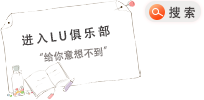
<style>
.page{position:relative;width:204px;height:100px;background:#ffffff}
.page>*{position:absolute;margin:0}
.t1{font:12.3px "AdobeHeitiStd-Regular";letter-spacing:0.2em;color:#474343}
.t2{font:12px "AdobeHeitiStd-Regular";letter-spacing:0.2em;color:#474343}
.t3{font:10px "AdobeHeitiStd-Regular";color:#86807e}
</style>
<div class="page">
<p class="t1" style="left:169px;top:6px;width:26px;height:13px">搜索</p>
<p class="t2" style="left:22px;top:25px;width:88px;height:21px;rotate:-7deg">进入LU俱乐部</p>
<p class="t3" style="left:39px;top:46px;width:68px;height:16px;rotate:-6deg">“给你意想不到”</p>
</div>
